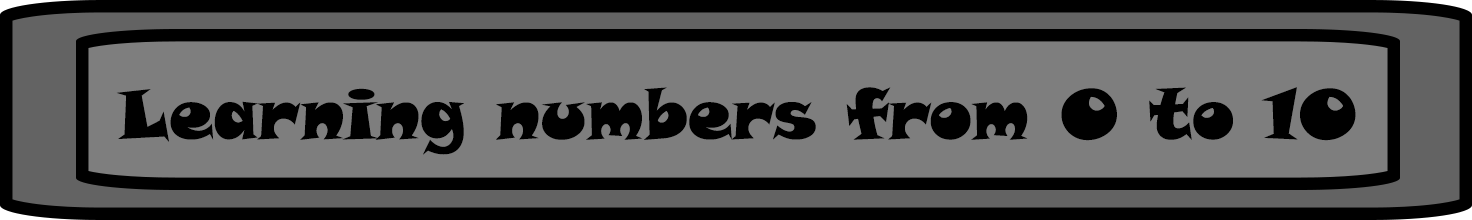
<style>
.page{position:relative;width:1472px;height:220px;background:#7e7e7e}
.page>*{position:absolute;margin:0}
.t1{font:70px "SnapITC-Regular";color:#000000}
.t2{font:75px "SnapITC-Regular";color:#000000}
</style>
<div class="page">
<p class="t1" style="left:116px;top:87px;width:1240px;height:68px"><span class="t2"><br></span>Learning numbers from 0 to 10</p>
</div>
